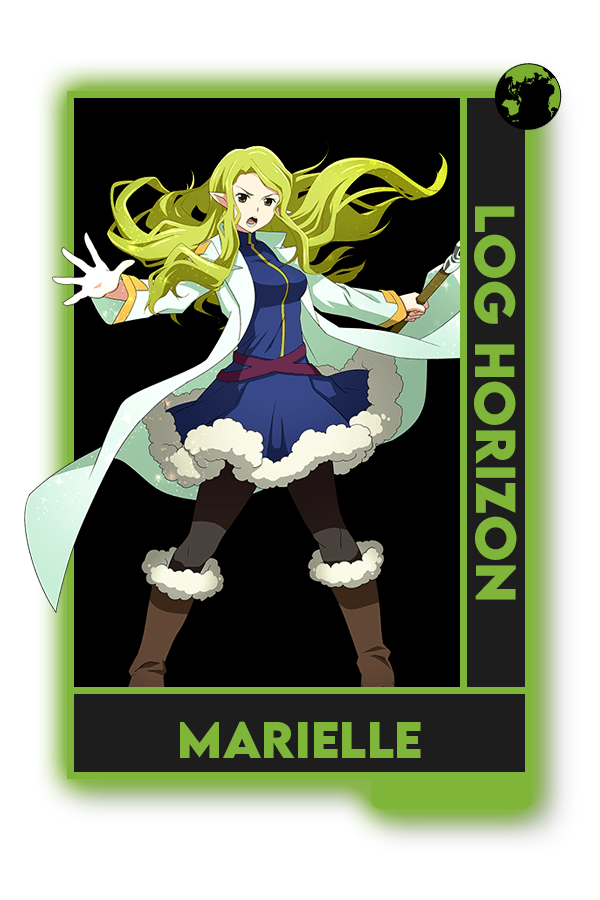
<style>
.page{position:relative;width:600px;height:900px;background:#000000}
.page>*{position:absolute;margin:0}
.t1{font:50px "LEMONMILK-Bold";color:#7fad41}
.t2{font:45.8px "LEMONMILK-Bold";color:#7fad41}
</style>
<div class="page">
<p class="t1" style="left:474px;top:206px;width:43px;height:394px;rotate:90deg">Log Horizon</p>
<p class="t2" style="left:180px;top:721px;width:241px;height:37px">Marielle</p>
</div>
